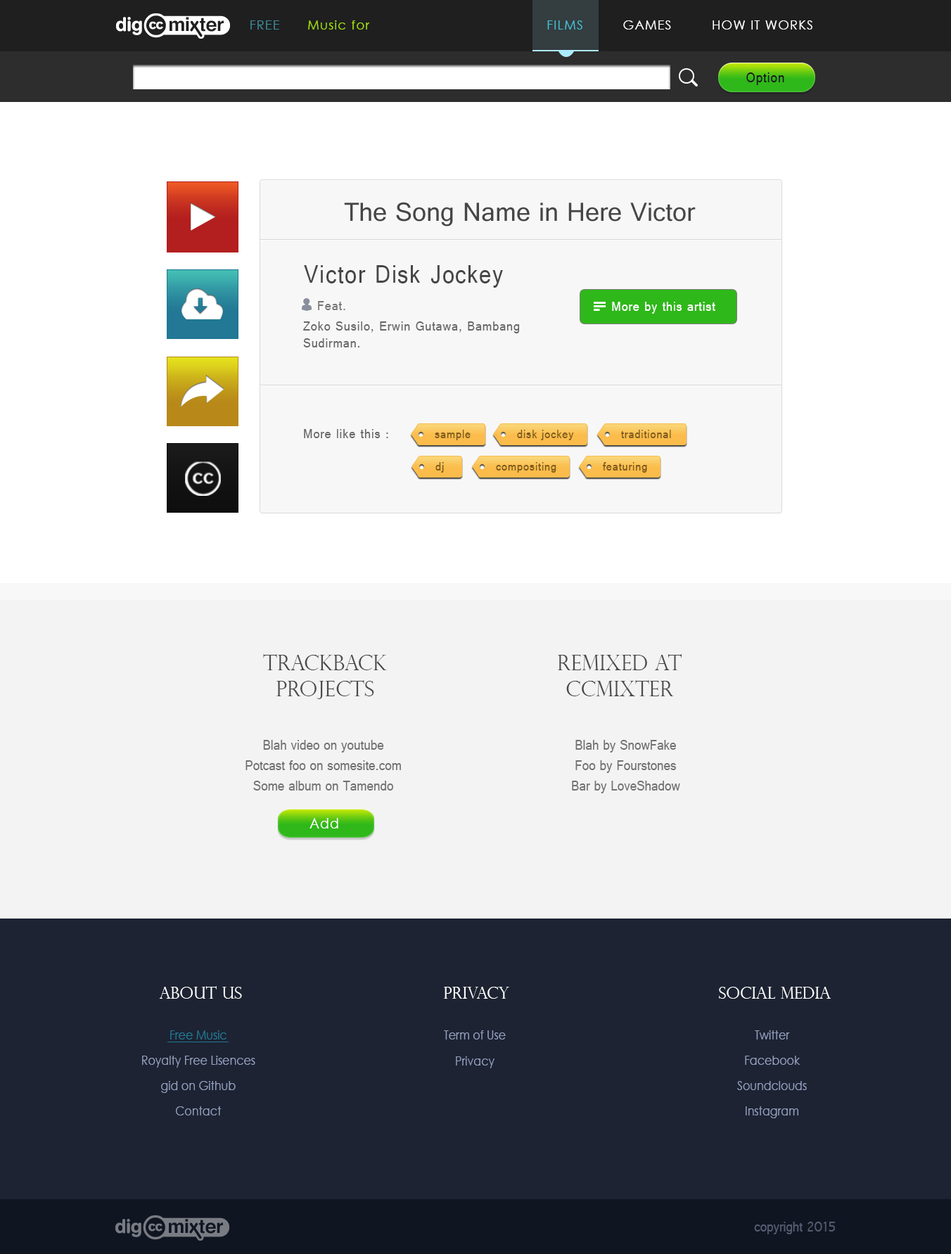
<style>
.page{position:relative;width:951px;height:1254px;background:#f3f3f3}
.page>*{position:absolute;margin:0}
.t1{font:12.7px "CenturyGothic";letter-spacing:0.075em;color:#3d8c9b}
.t2{font:12.7px "CenturyGothic";letter-spacing:0.075em;color:#a1dd0c}
.t3{font:12.7px "CenturyGothic";letter-spacing:0.075em;color:#45bdce}
.t4{font:12.7px "CenturyGothic";letter-spacing:0.075em;color:#ffffff}
.t5{font:14.8px "Raavi";letter-spacing:0.05em;color:#171719;scale:0.9 1}
.t6{font:28.1px "Raavi";color:#464646}
.t7{font:26.6px "Raavi";letter-spacing:0.05em;color:#464646;scale:0.9 1}
.t8{font:14.1px "Raavi";letter-spacing:0.05em;color:#767676;scale:0.9 1}
.t9{font:14.1px "Raavi";letter-spacing:0.05em;color:#ffffff;scale:0.9 1}
.t10{font:14.1px "Raavi";letter-spacing:0.05em;color:#676767;scale:0.9 1}
.t11{font:12.7px "Raavi";letter-spacing:0.05em;color:#7b591c;scale:0.9 1}
.t12{font:21.3px "PerpetuaTitlingMT-Light";color:#4b4b4b}
.t13{font:14.8px/20.4px "Raavi";color:#717171;scale:0.9 1}
.t14{font:14.8px "CenturyGothic";letter-spacing:0.05em;color:#ffffff;scale:0.9 1}
.t15{font:16.4px "PerpetuaTitlingMT-Light";color:#ffffff}
.t16{font:12.6px/25.4px "CenturyGothic";color:#929fbf;scale:0.89 1}
.t17{font:12.6px/25.4px "CenturyGothic";color:#227895;scale:0.89 1}
.t18{font:12.6px/25.3px "CenturyGothic";color:#929fbf;scale:0.89 1}
.t19{font:14.8px "Raavi";color:#545c71;scale:0.89 1}
</style>
<div class="page">
<p class="t1" style="left:250px;top:20px;width:29px;height:10px">FREE</p>
<p class="t2" style="left:308px;top:20px;width:62px;height:10px">Music for</p>
<p class="t3" style="left:547px;top:20px;width:35px;height:10px">FILMS</p>
<p class="t4" style="left:623px;top:20px;width:48px;height:10px">GAMES</p>
<p class="t4" style="left:712px;top:20px;width:100px;height:10px">HOW IT WORKS</p>
<p class="t5" style="left:746px;top:72px;width:38px;height:13px">Option</p>
<p class="t6" style="left:344px;top:202px;width:352px;height:24px">The Song Name in Here Victor</p>
<p class="t7" style="left:304px;top:265px;width:199px;height:23px">Victor Disk Jockey</p>
<p class="t8" style="left:318px;top:301px;width:27px;height:9px">Feat.</p>
<p class="t9" style="left:612px;top:302px;width:103px;height:12px">More by this artist</p>
<p class="t10" style="left:303px;top:321px;width:217px;height:26px">Zoko Susilo, Erwin Gutawa, Bambang<br>Sudirman.</p>
<p class="t10" style="left:304px;top:429px;width:84px;height:9px">More like this :</p>
<p class="t11" style="left:435px;top:430px;width:36px;height:10px">sample</p>
<p class="t11" style="left:517px;top:430px;width:57px;height:10px">disk jockey</p>
<p class="t11" style="left:621px;top:430px;width:50px;height:8px">traditional</p>
<p class="t11" style="left:435px;top:462px;width:9px;height:11px">dj</p>
<p class="t11" style="left:496px;top:462px;width:60px;height:11px">compositing</p>
<p class="t11" style="left:603px;top:462px;width:44px;height:11px">featuring</p>
<p class="t12" style="left:263px;top:654px;width:124px;height:45px;text-align:center">TRACKBACK<br>PROJECTS</p>
<p class="t12" style="left:558px;top:654px;width:124px;height:42px;text-align:center">REMIXED AT<br>CCMIXTER</p>
<p class="t13" style="left:245px;top:740px;width:156px;height:51px;text-align:center">Blah video on youtube<br>Potcast foo on somesite.com<br>Some album on Tamendo</p>
<p class="t13" style="left:572px;top:740px;width:108px;height:53px;text-align:center">Blah by SnowFake<br>Foo by Fourstones<br>Bar by LoveShadow</p>
<p class="t14" style="left:309px;top:818px;width:29px;height:11px">Add</p>
<p class="t15" style="left:159px;top:986px;width:83px;height:13px">ABout us</p>
<p class="t15" style="left:444px;top:987px;width:65px;height:12px">Privacy</p>
<p class="t15" style="left:719px;top:987px;width:112px;height:12px">SOCIAL MEDIA</p>
<p class="t16" style="left:142px;top:1030px;width:113px;height:85px;text-align:center"><span class="t17">Free Music<br></span>Royalty Free Lisences<br>gid on Github<br>Contact</p>
<p class="t16" style="left:444px;top:1030px;width:62px;height:38px;text-align:center">Term of Use<br>Privacy</p>
<p class="t18" style="left:737px;top:1030px;width:70px;height:88px;text-align:center">Twitter<br>Facebook<br>Soundclouds<br>Instagram</p>
<p class="t19" style="left:754px;top:1222px;width:81px;height:12px">copyright 2015</p>
</div>
